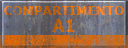
<style>
.page{position:relative;width:128px;height:48px}
.page>*{position:absolute;margin:0}
.t1{font:13.3px/14px "Verdana-Bold";scale:0.9 1}
.t2{font:17.8px/17px "Verdana-Bold";scale:0.9 1}
</style>
<div class="page">
<p class="t1" style="left:4px;top:6px;width:120px;height:26px;text-align:center">COMPARTIMENTO<br><span class="t2">A1</span></p>
</div>
